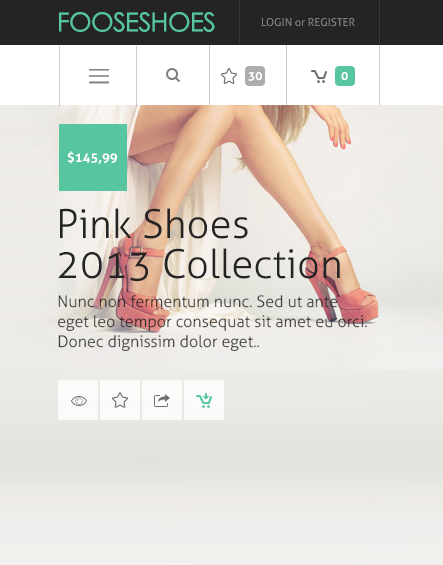
<style>
.page{position:relative;width:443px;height:565px}
.page>*{position:absolute;margin:0}
.t1{font:26px "STHeitiSC-Medium";letter-spacing:-0.025em;color:#57c5a0;text-transform:uppercase}
.t2{font:11px "Aller";color:#7e7e7e;text-transform:uppercase}
.t3{font:11px "Aller";color:#7e7e7e}
.t4{font:12px "Aller-Bold";color:#ffffff}
.t5{font:13px "Aller-Bold";color:#ffffff}
.t6{font:40px/40px "Aller-Light";color:#242424}
.t7{font:16px/20px "Aller-Light";color:#242424}
</style>
<div class="page">
<p class="t1" style="left:59px;top:12px;width:156px;height:20px">FooseShoes</p>
<p class="t2" style="left:262px;top:18px;width:93px;height:9px">Login <span class="t3">or </span>register</p>
<p class="t4" style="left:248px;top:72px;width:14px;height:9px">30</p>
<p class="t4" style="left:341px;top:72px;width:7px;height:9px">0</p>
<p class="t5" style="left:67px;top:151px;width:50px;height:13px">$145,99</p>
<p class="t6" style="left:58px;top:208px;width:282px;height:74px">Pink Shoes<br>2013 Collection</p>
<p class="t7" style="left:58px;top:295px;width:309px;height:56px">Nunc non fermentum nunc. Sed ut ante <br>eget leo tempor consequat sit amet eu orci. <br>Donec dignissim dolor eget..</p>
</div>
